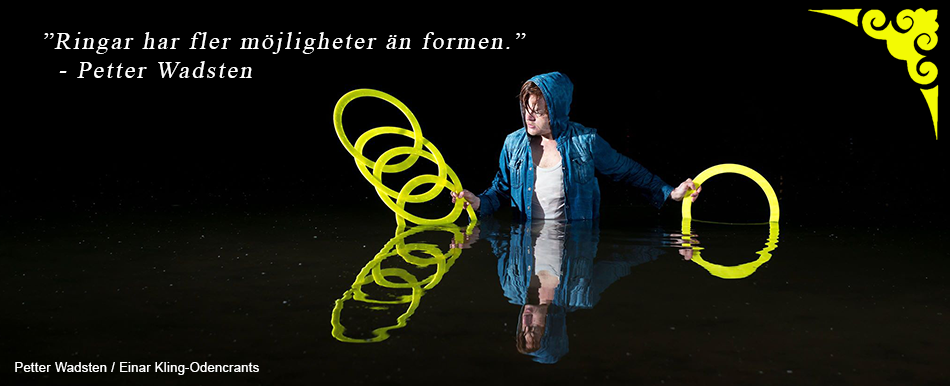
<style>
.page{position:relative;width:950px;height:386px;background:#000000}
.page>*{position:absolute;margin:0}
.t1{font:24px "TimesNewRomanPSMT";letter-spacing:0.1em;color:#ffffff;font-style:italic}
.t2{font:12.5px "ArialMT";letter-spacing:0.04em;color:#ffffff}
</style>
<div class="page">
<p class="t1" style="left:44px;top:32px;width:482px;height:46px">”Ringar har fler möjligheter än formen.”<br> - Petter Wadsten</p>
<p class="t2" style="left:15px;top:362px;width:244px;height:13px">Petter Wadsten / Einar Kling-Odencrants</p>
</div>
